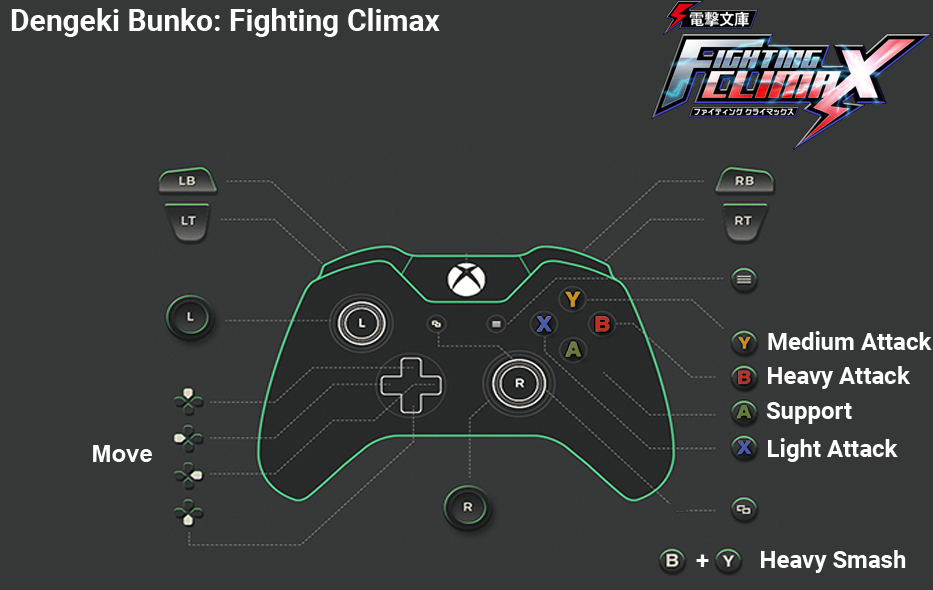
<style>
.page{position:relative;width:933px;height:590px;background:#363838}
.page>*{position:absolute;margin:0}
.t1{font:30px "Roboto-Bold";color:#ffffff}
.t2{font:24px "Roboto-Bold";color:#ffffff}
.t3{font:24px "Arial-BoldMT";color:#fefefe}
.t4{font:24px "Roboto-Bold";color:#fefefe}
</style>
<div class="page">
<p class="t1" style="left:11px;top:8px;width:429px;height:29px">Dengeki Bunko: Fighting Climax</p>
<p class="t2" style="left:768px;top:331px;width:164px;height:19px">Medium Attack</p>
<p class="t2" style="left:768px;top:366px;width:143px;height:23px">Heavy Attack</p>
<p class="t2" style="left:766px;top:402px;width:86px;height:22px">Support</p>
<p class="t2" style="left:768px;top:438px;width:130px;height:24px">Light Attack</p>
<p class="t3" style="left:93px;top:445px;width:59px;height:17px">Move</p>
<p class="t4" style="left:696px;top:554px;width:13px;height:13px">+</p>
<p class="t2" style="left:761px;top:550px;width:145px;height:23px">Heavy Smash</p>
</div>
